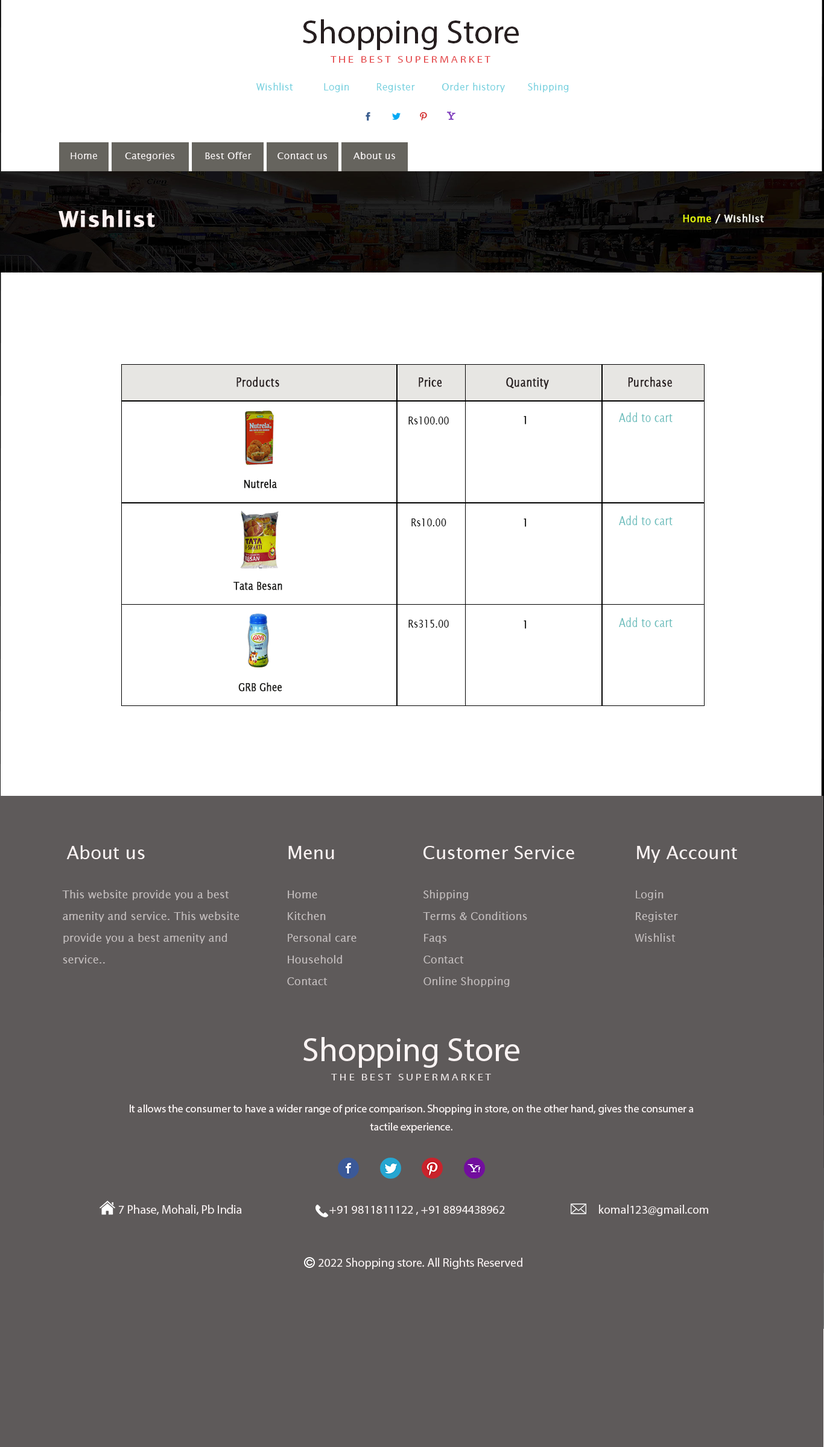
<style>
.page{position:relative;width:824px;height:1447px;background:#ffffff}
.page>*{position:absolute;margin:0}
.t1{font:33.7px "MyriadPro-Regular";color:#261e1f}
.t2{font:9.8px "MyriadPro-Regular";letter-spacing:0.2em;color:#e54c4f;text-transform:uppercase;scale:1.15 1}
.t3{font:9.8px "LucidaSans";color:#74d1df}
.t4{font:9.3px "LucidaSans";color:#f9f5f5;scale:1.05 1}
.t5{font:21.7px "LucidaSans-Demi";letter-spacing:0.025em;color:#fcf1f1;font-weight:bold}
.t6{font:9.6px "LucidaSans";letter-spacing:0.025em;color:#f4f5ed;font-weight:bold}
.t7{font:9.6px "LucidaSans";letter-spacing:0.025em;color:#e5f90a;font-weight:bold}
.t8{font:12.1px "LucidaSans";color:#261e1f;font-weight:bold;scale:0.82 1}
.t9{font:12.1px "LucidaSans";color:#68bcbb;scale:0.82 1}
.t10{font:10.9px "LucidaSans";color:#050505;scale:0.82 1}
.t11{font:10.9px "LucidaSans";color:#1c1c1a;font-weight:bold;scale:0.82 1}
.t12{font:10.9px "LucidaSans";color:#0f0f0e;font-weight:bold;scale:0.82 1}
.t13{font:10.9px "LucidaSans";color:#181816;font-weight:bold;scale:0.82 1}
.t14{font:18.1px "LucidaSans";color:#faf3f3}
.t15{font:18.1px "LucidaSans";letter-spacing:0.025em;color:#faf3f3}
.t16{font:10.9px/21.7px "LucidaSans";color:#c2bdbd}
.t17{font:10.9px/21.7px "LucidaSans";color:#c4bebe}
.t18{font:33.7px "MyriadPro-Regular";color:#faf3f3}
.t19{font:9.8px "MyriadPro-Regular";letter-spacing:0.2em;color:#f6f0f0;text-transform:uppercase;scale:1.15 1}
.t20{font:10.9px/18.1px "MyriadPro-Regular";color:#f6f0f0}
.t21{font:12.1px "MyriadPro-Regular";color:#f6f0f0}
</style>
<div class="page">
<p class="t1" style="left:303px;top:19px;width:216px;height:31px">Shopping Store</p>
<p class="t2" style="left:330px;top:56px;width:160px;height:7px">The Best Supermarket</p>
<p class="t3" style="left:256px;top:83px;width:37px;height:7px">Wishlist</p>
<p class="t3" style="left:324px;top:83px;width:25px;height:9px">Login</p>
<p class="t3" style="left:377px;top:83px;width:38px;height:9px">Register</p>
<p class="t3" style="left:442px;top:83px;width:63px;height:9px">Order history</p>
<p class="t3" style="left:528px;top:83px;width:41px;height:9px">Shipping</p>
<p class="t4" style="left:71px;top:153px;width:26px;height:6px">Home</p>
<p class="t4" style="left:125px;top:153px;width:50px;height:8px">Categories</p>
<p class="t4" style="left:205px;top:152px;width:46px;height:7px">Best Offer</p>
<p class="t4" style="left:277px;top:153px;width:50px;height:6px">Contact us</p>
<p class="t4" style="left:353px;top:152px;width:42px;height:7px">About us</p>
<p class="t5" style="left:59px;top:210px;width:96px;height:17px">Wishlist</p>
<p class="t6" style="left:683px;top:214px;width:81px;height:10px"><span class="t7">Home </span>/ Wishlist</p>
<p class="t8" style="left:236px;top:377px;width:43px;height:10px">Products</p>
<p class="t8" style="left:419px;top:378px;width:23px;height:9px">Price</p>
<p class="t8" style="left:506px;top:378px;width:43px;height:12px">Quantity</p>
<p class="t8" style="left:628px;top:377px;width:44px;height:10px">Purchase</p>
<p class="t9" style="left:619px;top:413px;width:53px;height:9px">Add to cart</p>
<p class="t10" style="left:408px;top:417px;width:41px;height:8px">Rs100.00</p>
<p class="t11" style="left:523px;top:416px;width:4px;height:9px">1</p>
<p class="t12" style="left:244px;top:479px;width:33px;height:10px">Nutrela</p>
<p class="t10" style="left:411px;top:519px;width:35px;height:8px">Rs10.00</p>
<p class="t11" style="left:523px;top:519px;width:4px;height:8px">1</p>
<p class="t9" style="left:619px;top:516px;width:53px;height:9px">Add to cart</p>
<p class="t13" style="left:233px;top:582px;width:49px;height:8px">Tata Besan</p>
<p class="t9" style="left:619px;top:618px;width:53px;height:9px">Add to cart</p>
<p class="t10" style="left:408px;top:620px;width:41px;height:8px">Rs315.00</p>
<p class="t11" style="left:523px;top:621px;width:4px;height:8px">1</p>
<p class="t11" style="left:238px;top:683px;width:44px;height:9px">GRB Ghee</p>
<p class="t14" style="left:66px;top:846px;width:79px;height:13px">About us</p>
<p class="t14" style="left:288px;top:846px;width:46px;height:13px">Menu</p>
<p class="t14" style="left:423px;top:846px;width:151px;height:13px"><span class="t15">C</span>ustomer Service</p>
<p class="t14" style="left:637px;top:846px;width:100px;height:17px">My Account</p>
<p class="t16" style="left:62px;top:890px;width:177px;height:74px">This website provide you a best amenity and service. This website provide you a best amenity and service..</p>
<p class="t17" style="left:287px;top:891px;width:69px;height:94px">Home       Kitchen     Personal care       Household        Contact</p>
<p class="t16" style="left:423px;top:890px;width:104px;height:97px">Shipping  Terms &amp; Conditions Faqs    Contact    Online Shopping</p>
<p class="t16" style="left:634px;top:890px;width:44px;height:52px">Login  Register  Wishlist</p>
<p class="t18" style="left:303px;top:1037px;width:216px;height:31px">Shopping Store</p>
<p class="t19" style="left:331px;top:1074px;width:160px;height:7px;opacity:0.89">The Best Supermarket</p>
<p class="t20" style="left:130px;top:1105px;width:564px;height:28px;text-align:center">It allows the consumer to have a wider range of price comparison. Shopping in store, on the other hand, gives the consumer a tactile experience.</p>
<p class="t21" style="left:119px;top:1205px;width:123px;height:10px">7 Phase, Mohali, Pb India</p>
<p class="t21" style="left:599px;top:1205px;width:109px;height:11px">komal123@gmail.com</p>
<p class="t21" style="left:329px;top:1206px;width:176px;height:9px">+91 9811811122 , +91 8894438962</p>
<p class="t21" style="left:318px;top:1258px;width:204px;height:12px">2022 Shopping store. All Rights Reserved</p>
</div>
